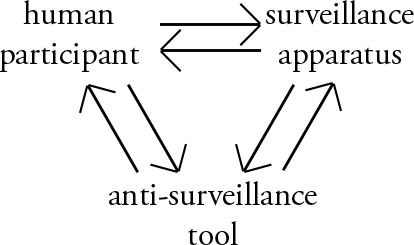
<style>
.page{position:relative;width:414px;height:245px;background:#ffffff}
.page>*{position:absolute;margin:0}
.t1{font:33.3px "AGaramondPro-Regular";color:#000000}
</style>
<div class="page">
<p class="t1" style="left:0px;top:0px;width:139px;height:72px;text-align:center">human<br>participant</p>
<p class="t1" style="left:266px;top:0px;width:148px;height:72px;text-align:center">surveillance<br>apparatus</p>
<p class="t1" style="left:109px;top:181px;width:208px;height:64px;text-align:center">anti-surveillance<br>tool</p>
</div>
